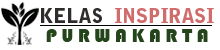
<style>
.page{position:relative;width:220px;height:50px;background:#ffffff}
.page>*{position:absolute;margin:0}
.t1{font:19.5px "BellGothicStd-Black";color:#d06c6c}
.t2{font:19.5px "BellGothicStd-Black";color:#302c2c}
.t3{font:19.5px "Bauhaus93";color:#24451b}
</style>
<div class="page">
<p class="t1" style="left:41px;top:8px;width:173px;height:15px"><span class="t2">KELAS  </span>INSPIRASI</p>
<p class="t3" style="left:46px;top:29px;width:162px;height:13px">P U R W A K A R T A</p>
</div>
